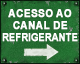
<style>
.page{position:relative;width:80px;height:64px}
.page>*{position:absolute;margin:0}
.t1{font:11px/12px "Arial-BoldMT";letter-spacing:-0.02em;color:#ffffff;text-transform:uppercase;font-weight:bold;scale:0.92 1}
.t2{font:11px/12px "Arial-BoldMT";letter-spacing:-0.06em;color:#ffffff;text-transform:uppercase;font-weight:bold;scale:0.87 1}
</style>
<div class="page">
<p class="t1" style="left:2px;top:9px;width:76px;height:33px;text-align:center">Acesso ao<br>canal de<br><span class="t2">refrigeraNTE</span></p>
</div>
